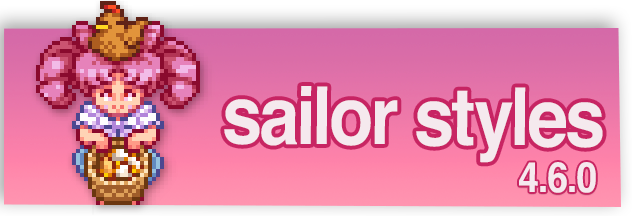
<style>
.page{position:relative;width:632px;height:216px}
.page>*{position:absolute;margin:0}
.t1{font:80px "Helvetica-Bold";letter-spacing:-0.025em;color:#f5e9ee;scale:0.9 1}
.t2{font:42px "Helvetica-Bold";letter-spacing:-0.025em;color:#f5e9ee;scale:0.9 1}
</style>
<div class="page">
<p class="t1" style="left:224px;top:86px;width:379px;height:77px">sailor styles</p>
<p class="t2" style="left:519px;top:162px;width:77px;height:31px">4.6.0</p>
</div>
